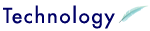
<style>
.page{position:relative;width:150px;height:31px;background:#ffffff}
.page>*{position:absolute;margin:0}
.t1{font:20px "FuturaExtended";letter-spacing:0.1em;color:#000066}
</style>
<div class="page">
<p class="t1" style="left:3px;top:5px;width:112px;height:24px">Technology</p>
</div>
